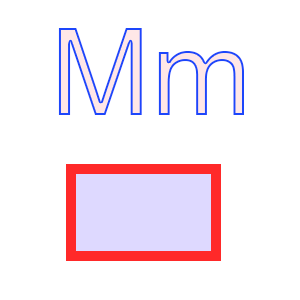
<style>
.page{position:relative;width:300px;height:300px;background:#ffffff}
.page>*{position:absolute;margin:0}
.t1{font:121.5px "ArialMT"}
</style>
<div class="page">
<p class="t1" style="left:58px;top:28px;width:186px;height:87px">Mm</p>
</div>
